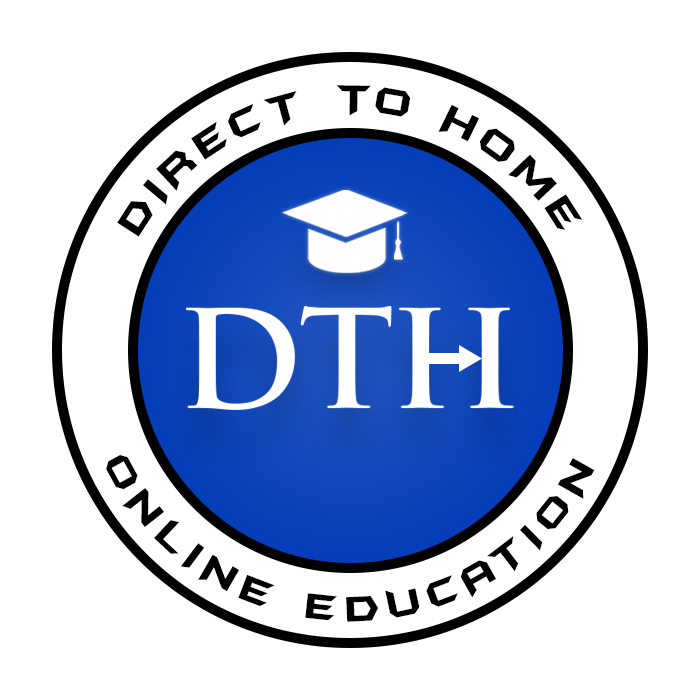
<style>
.page{position:relative;width:700px;height:700px;background:#ffffff}
.page>*{position:absolute;margin:0}
.t1{font:43.3px/58.3px "BatmanForeverAlternate";letter-spacing:0.1em;color:#000000}
.t2{font:41.7px/58.3px "BatmanForeverAlternate";letter-spacing:0.2em;color:#000000}
</style>
<div class="page">
<p class="t1" style="left:117px;top:85px;width:466px;height:152px;text-align:center">DIRECT TO HOME</p>
<p class="t2" style="left:106px;top:455px;width:489px;height:167px;text-align:center">ONLINE EDUCATION</p>
</div>
